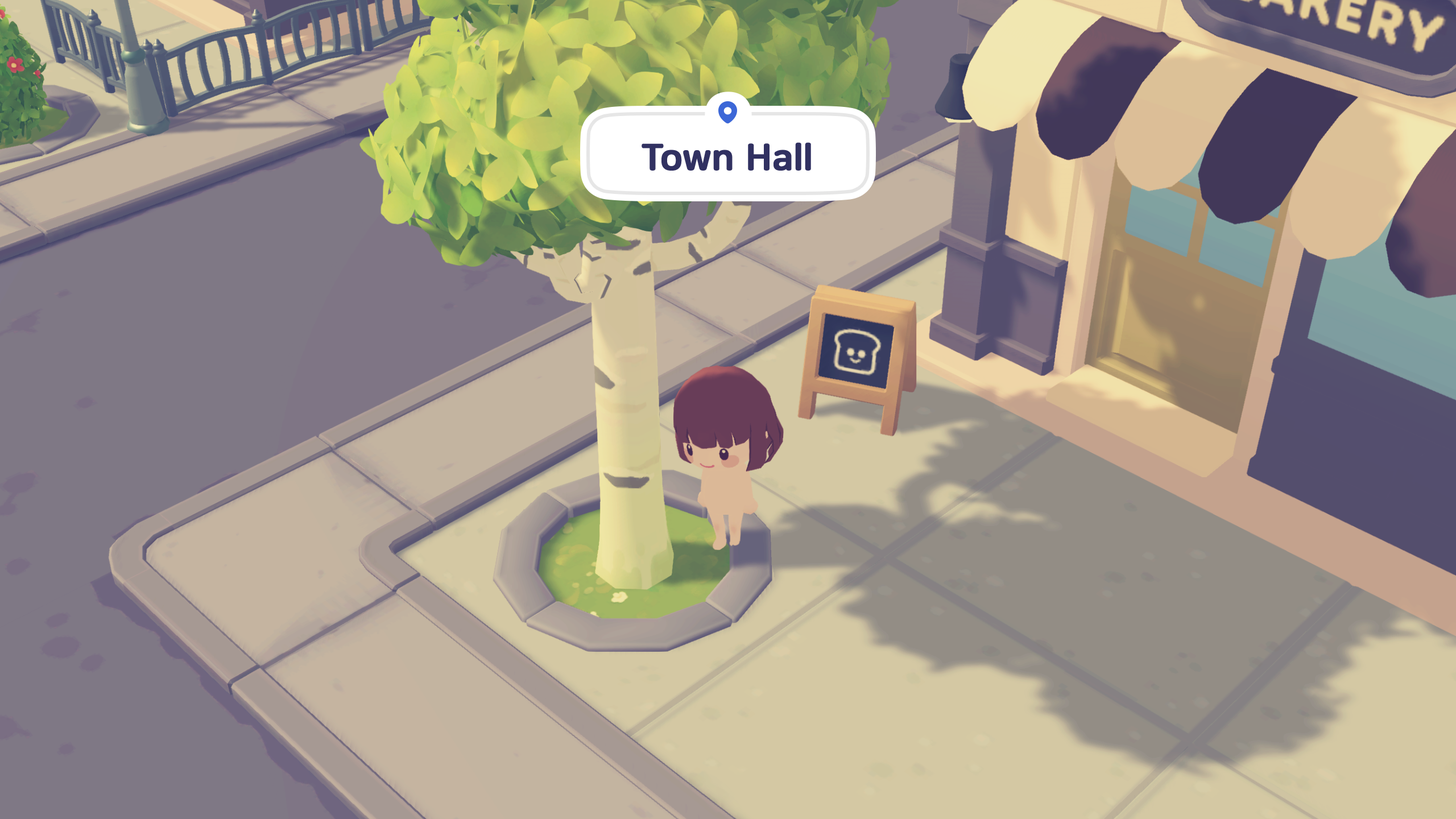
<style>
.page{position:relative;width:1456px;height:819px}
.page>*{position:absolute;margin:0}
.t1{font:36.9px "NanumSquareRoundEB";color:#313161;font-weight:bold}
</style>
<div class="page">
<p class="t1" style="left:642px;top:142px;width:169px;height:29px">Town Hall</p>
</div>
